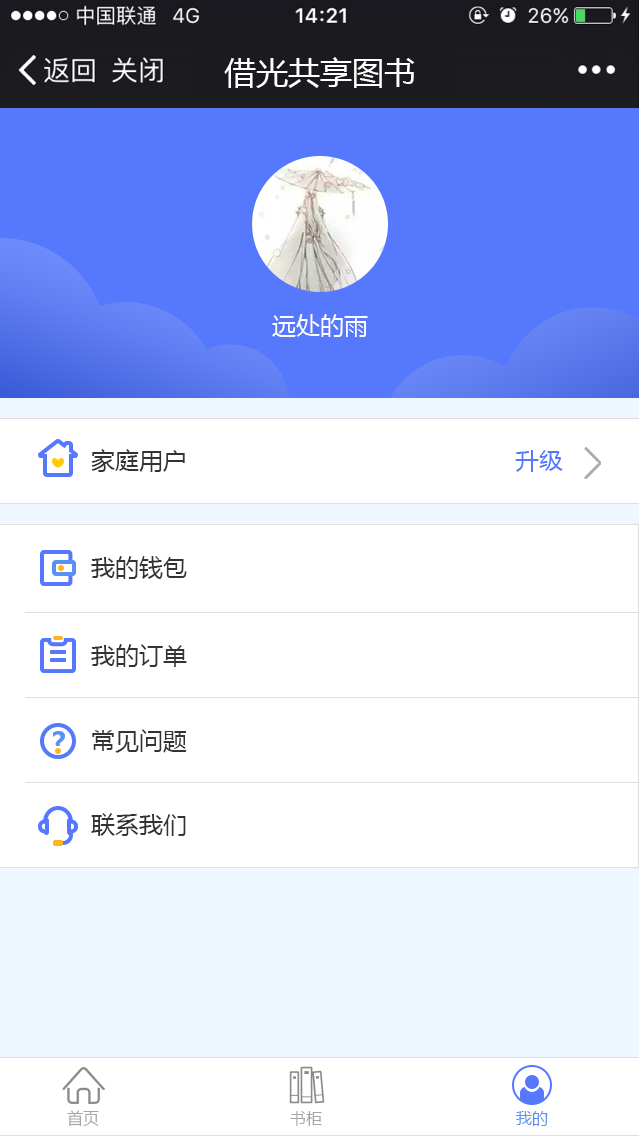
<style>
.page{position:relative;width:639px;height:1136px;background:#ffffff}
.page>*{position:absolute;margin:0}
.t1{font:32px "MicrosoftYaHei";color:#ffffff}
.t2{font:24px "MicrosoftYaHei";color:#ffffff}
.t3{font:24px "MicrosoftYaHei";color:#333333}
.t4{font:24px "MicrosoftYaHei";color:#5578fc}
.t5{font:16px "MicrosoftYaHei";color:#a7a7a8}
.t6{font:16px "MicrosoftYaHei";color:#5990f4}
</style>
<div class="page">
<p class="t1" style="left:224px;top:57px;width:191px;height:31px">借光共享图书</p>
<p class="t2" style="left:272px;top:314px;width:96px;height:23px">远处的雨</p>
<p class="t3" style="left:91px;top:449px;width:94px;height:23px">家庭用户</p>
<p class="t4" style="left:515px;top:450px;width:48px;height:22px">升级</p>
<p class="t3" style="left:91px;top:556px;width:96px;height:23px">我的钱包</p>
<p class="t3" style="left:91px;top:644px;width:96px;height:23px">我的订单</p>
<p class="t3" style="left:92px;top:729px;width:95px;height:24px">常见问题</p>
<p class="t3" style="left:91px;top:813px;width:95px;height:23px">联系我们</p>
<p class="t5" style="left:67px;top:1110px;width:32px;height:17px">首页</p>
<p class="t5" style="left:290px;top:1111px;width:32px;height:15px">书柜</p>
<p class="t6" style="left:516px;top:1111px;width:32px;height:15px">我的</p>
</div>
